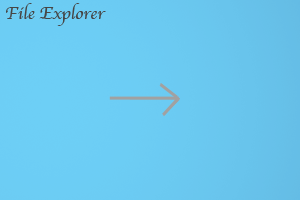
<style>
.page{position:relative;width:300px;height:200px}
.page>*{position:absolute;margin:0}
.t1{font:18px "Apple-Chancery";color:#464646}
</style>
<div class="page">
<p class="t1" style="left:6px;top:3px;width:100px;height:23px">File Explorer</p>
</div>
